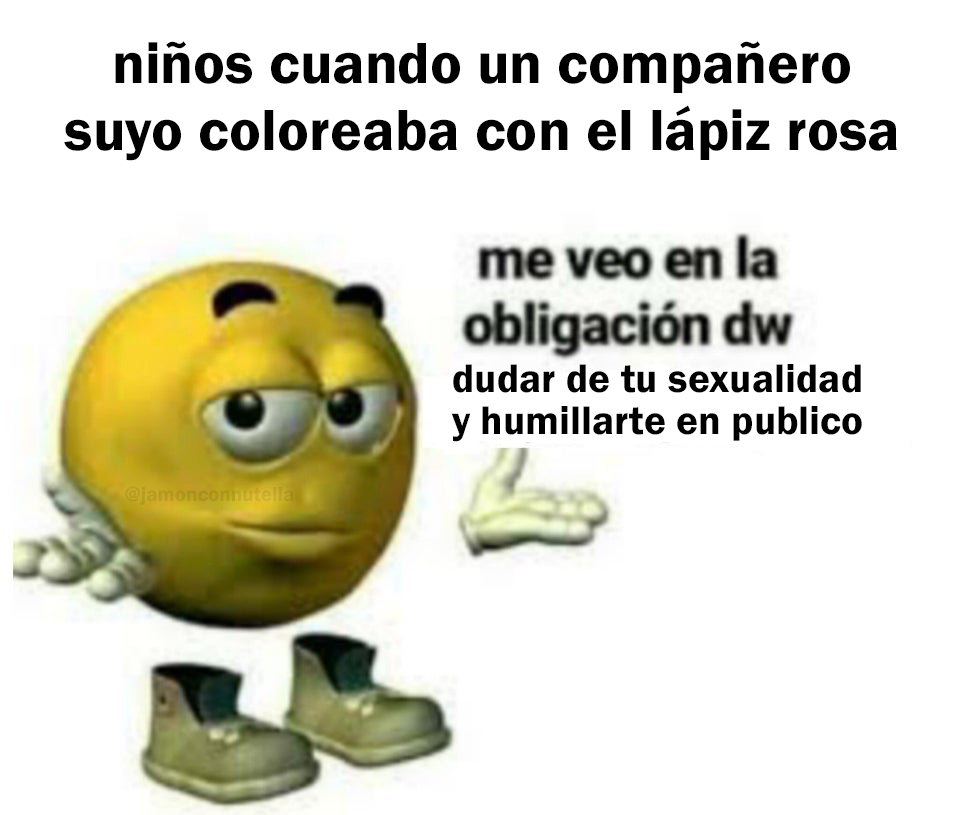
<style>
.page{position:relative;width:960px;height:815px;background:#ffffff}
.page>*{position:absolute;margin:0}
.t1{font:60px "FranklinGothic-Demi";color:#000000}
.t2{font:41.3px "FranklinGothic-Demi";color:#000000}
.t3{font:20.9px "FranklinGothic-Demi";color:#b69c22}
</style>
<div class="page">
<p class="t1" style="left:64px;top:41px;width:833px;height:120px;text-align:center">niños cuando un compañero<br>suyo coloreaba con el lápiz rosa</p>
<p class="t2" style="left:451px;top:364px;width:411px;height:78px;text-align:center">dudar de tu sexualidad<br>y humillarte en publico</p>
<p class="t3" style="left:125px;top:486px;width:169px;height:19px">@jamonconnutella</p>
</div>
